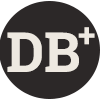
<style>
.page{position:relative;width:100px;height:100px;background:#2c2828}
.page>*{position:absolute;margin:0}
.t1{font:55px "RobotoSlab-Bold";color:#eee9e1}
</style>
<div class="page">
<p class="t1" style="left:78px;top:27px;width:17px;height:18px">+</p>
<p class="t1" style="left:7px;top:32px;width:72px;height:40px">DB</p>
</div>
